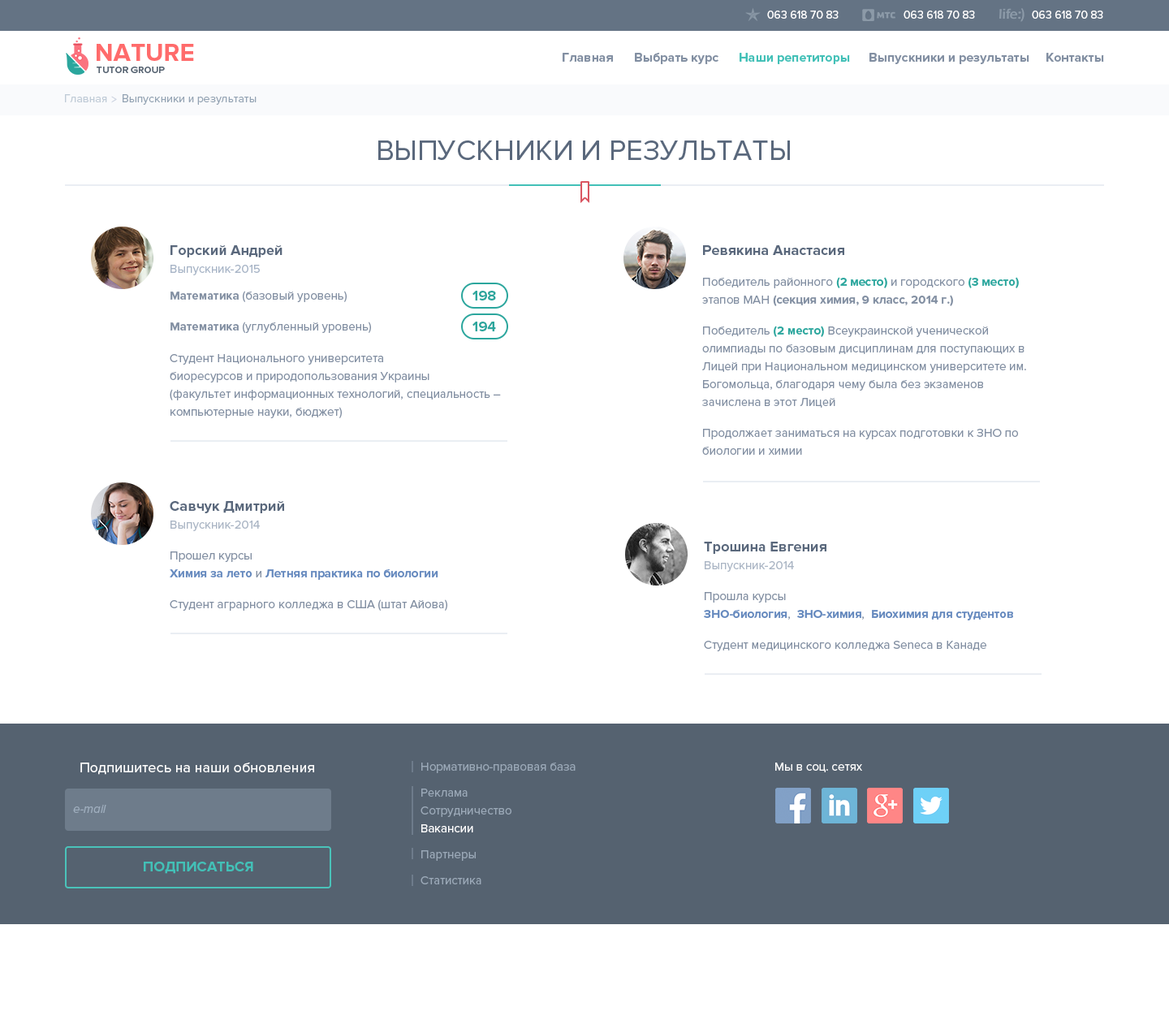
<style>
.page{position:relative;width:1169px;height:1020px;background:#ffffff}
.page>*{position:absolute;margin:0}
.t1{font:11.4px "ProximaNova-Regular";color:#ffffff}
.t2{font:25.2px "ProximaNova-Bold";color:#ff6b6b}
.t3{font:13px "ProximaNova-Bold";color:#828fa2}
.t4{font:13px "ProximaNova-Bold";color:#42c0b7}
.t5{font:9.7px "ProximaNova-Semibold";color:#556270;text-transform:uppercase}
.t6{font:11.4px "ProximaNova-Regular";color:#a8b5c4}
.t7{font:11.4px "ProximaNova-Regular";color:#7d8c9c}
.t8{font:29.2px "ProximaNova-Regular";color:#5a687c;text-transform:uppercase}
.t9{font:14.6px/17.9px "ProximaNova-Bold";color:#5a687c}
.t10{font:12.2px/17.9px "ProximaNova-Regular";color:#a7b4c6}
.t11{font:14.6px "ProximaNova-Bold";color:#5a687c}
.t12{font:12.2px/17.9px "ProximaNova-Bold";color:#828fa2}
.t13{font:12.2px/17.9px "ProximaNova-Regular";color:#828fa2}
.t14{font:12.2px/17.9px "ProximaNova-Bold";color:#2ba69d}
.t15{font:12.2px "ProximaNova-Regular";color:#828fa2}
.t16{font:12.2px "ProximaNova-Bold";color:#828fa2}
.t17{font:14.6px "ProximaNova-Bold";color:#2ba69d}
.t18{font:12.2px/17.9px "ProximaNova-Regular";color:#aab5c4}
.t19{font:12.2px/17.9px "ProximaNova-Bold";color:#6589be}
.t20{font:14.6px "ProximaNova-Regular";color:#ffffff}
.t21{font:12.2px/17.9px "ProximaNova-Regular";color:#9ba9b8}
.t22{font:12.2px/26px "ProximaNova-Regular";color:#9ba9b8}
.t23{font:12.2px/17.9px "ProximaNova-Regular";color:#fefeff}
.t24{font:12.2px "ProximaNova-Regular";color:#ffffff}
.t25{font:12.2px "ProximaNova-RegularIt";color:#9faebe}
.t26{font:14.6px "ProximaNova-Bold";color:#42c0b7;text-transform:uppercase}
</style>
<div class="page">
<p class="t1" style="left:767px;top:11px;width:72px;height:8px">063 618 70 83</p>
<p class="t1" style="left:904px;top:11px;width:71px;height:8px">063 618 70 83</p>
<p class="t1" style="left:1032px;top:11px;width:71px;height:8px">063 618 70 83</p>
<p class="t2" style="left:97px;top:44px;width:97px;height:17px">NATURE</p>
<p class="t3" style="left:563px;top:53px;width:50px;height:9px">Главная</p>
<p class="t3" style="left:635px;top:53px;width:84px;height:11px">Выбрать курс</p>
<p class="t4" style="left:740px;top:53px;width:110px;height:11px">Наши репетиторы</p>
<p class="t3" style="left:870px;top:53px;width:160px;height:11px">Выпускники и результаты</p>
<p class="t3" style="left:1047px;top:53px;width:57px;height:9px">Контакты</p>
<p class="t5" style="left:97px;top:67px;width:68px;height:6px">Tutor group</p>
<p class="t6" style="left:65px;top:94px;width:42px;height:8px">Главная</p>
<p class="t7" style="left:123px;top:94px;width:134px;height:11px">Выпускники и результаты</p>
<p class="t8" style="left:378px;top:140px;width:412px;height:20px">Выпускники и результаты</p>
<p class="t9" style="left:171px;top:245px;width:112px;height:30px">Горский Андрей<br><span class="t10">Выпускник-2015</span></p>
<p class="t11" style="left:703px;top:245px;width:141px;height:10px">Ревякина Анастасия</p>
<p class="t12" style="left:702px;top:277px;width:317px;height:29px"><span class="t13">Победитель районного </span><span class="t14">(2 место)</span><span class="t13"> и городского </span><span class="t14">(3 место)</span><span class="t13"> <br>этапов МАН</span> (секция химия, 9 класс, 2014 г.)</p>
<p class="t15" style="left:171px;top:291px;width:176px;height:11px"><span class="t16">Математика </span>(базовый уровень)</p>
<p class="t17" style="left:473px;top:291px;width:23px;height:9px">198</p>
<p class="t15" style="left:171px;top:322px;width:200px;height:11px"><span class="t16">Математика </span>(углубленный уровень)</p>
<p class="t17" style="left:473px;top:322px;width:23px;height:9px">194</p>
<p class="t13" style="left:702px;top:326px;width:324px;height:82px">Победитель <span class="t14">(2 место)</span> Всеукраинской ученической олимпиады по базовым дисциплинам для поступающих в Лицей при Национальном медицинском университете им. Богомольца, благодаря чему была без экзаменов зачислена в этот Лицей</p>
<p class="t13" style="left:170px;top:354px;width:331px;height:64px">Студент Национального университета <br>биоресурсов и природопользования Украины <br>(факультет информационных технологий, специальность – компьютерные науки, бюджет)</p>
<p class="t13" style="left:702px;top:429px;width:316px;height:26px">Продолжает заниматься на курсах подготовки к ЗНО по биологии и химии</p>
<p class="t9" style="left:170px;top:501px;width:114px;height:30px">Савчук Дмитрий<br><span class="t18">Выпускник-2014</span></p>
<p class="t9" style="left:704px;top:542px;width:123px;height:30px">Трошина Евгения<br><span class="t18">Выпускник-2014</span></p>
<p class="t19" style="left:170px;top:551px;width:268px;height:29px"><span class="t13">Прошел курсы <br></span>Химия за лето<span class="t13"> и </span>Летняя практика по биологии</p>
<p class="t19" style="left:704px;top:592px;width:309px;height:28px"><span class="t13">Прошла курсы <br></span>ЗНО-биология<span class="t13">,  </span>ЗНО-химия<span class="t13">,  </span>Биохимия для студентов</p>
<p class="t15" style="left:170px;top:599px;width:277px;height:12px">Студент аграрного колледжа в США (штат Айова)</p>
<p class="t15" style="left:704px;top:641px;width:283px;height:10px">Студент медицинского колледжа Seneca в Канаде</p>
<p class="t20" style="left:80px;top:762px;width:234px;height:13px">Подпишитесь на наши обновления</p>
<p class="t21" style="left:421px;top:762px;width:155px;height:122px">Нормативно-правовая база<br><span class="t22">Реклама<br></span>Cотрудничество<br><span class="t23">Вакансии <br></span><span class="t22">Партнеры<br>Статистика</span></p>
<p class="t24" style="left:775px;top:762px;width:87px;height:10px">Мы в соц. сетях</p>
<p class="t25" style="left:73px;top:805px;width:33px;height:8px">e-mail</p>
<p class="t26" style="left:144px;top:862px;width:109px;height:12px">Подписаться</p>
</div>
